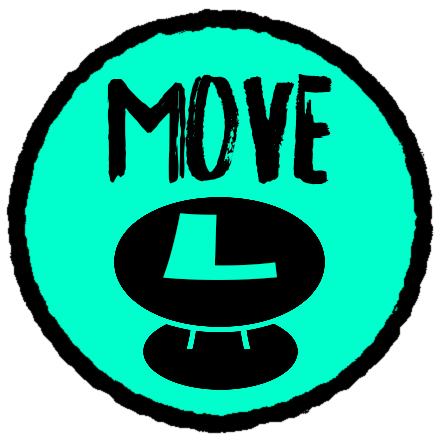
<style>
.page{position:relative;width:440px;height:440px;background:#00ffcc}
.page>*{position:absolute;margin:0}
.t1{font:132px "California-Medium";color:#000000;scale:0.97 1}
.t2{font:98.1px "ErasITC-Bold";color:#00ffcc;scale:1.53 1}
</style>
<div class="page">
<p class="t1" style="left:107px;top:74px;width:225px;height:111px">MOVE</p>
<p class="t2" style="left:163px;top:213px;width:114px;height:67px">L</p>
</div>
